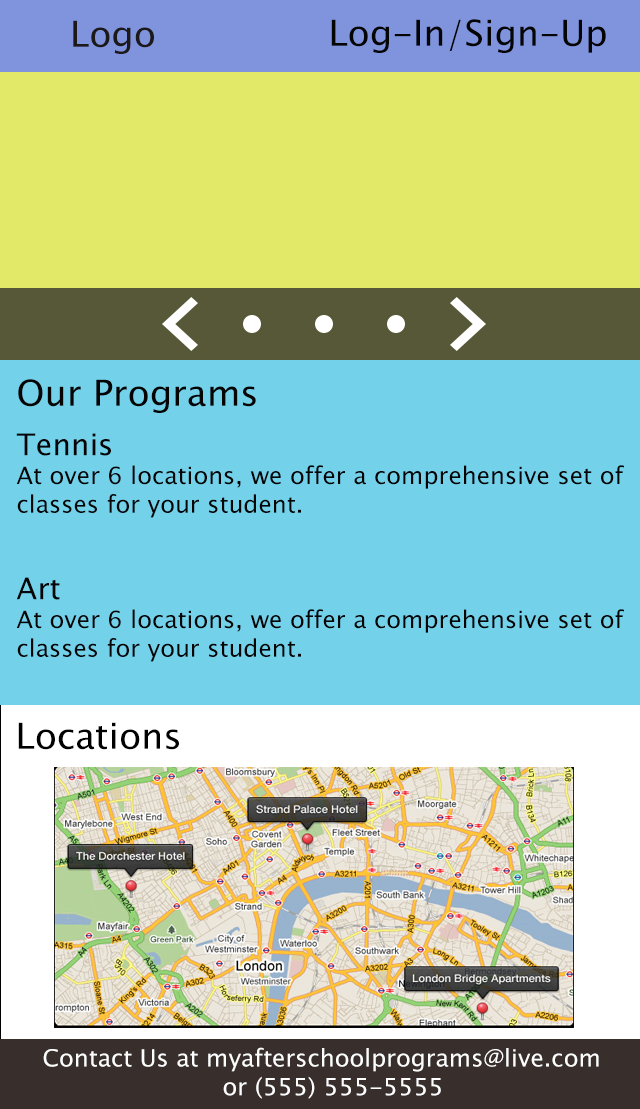
<style>
.page{position:relative;width:640px;height:1109px;background:#74d1ea}
.page>*{position:absolute;margin:0}
.t1{font:36px "LucidaSansUnicode";color:#1d1919}
.t2{font:36px "LucidaSansUnicode";color:#060505}
.t3{font:24px "LucidaSansUnicode";color:#060505}
.t4{font:30px "LucidaSansUnicode";color:#060505}
.t5{font:36px "LucidaSansUnicode";color:#000000}
.t6{font:24px "LucidaSansUnicode";color:#fefefe}
</style>
<div class="page">
<p class="t1" style="left:73px;top:20px;width:81px;height:34px">Logo</p>
<p class="t2" style="left:331px;top:19px;width:275px;height:34px">Log-In/Sign-Up</p>
<p class="t2" style="left:18px;top:379px;width:238px;height:34px">Our Programs</p>
<p class="t3" style="left:16px;top:433px;width:608px;height:229px"><span class="t4">Tennis<br></span>At over 6 locations, we offer a comprehensive set of classes for your student.<br><br><br><span class="t4">Art<br></span>At over 6 locations, we offer a comprehensive set of classes for your student.</p>
<p class="t5" style="left:18px;top:722px;width:161px;height:28px">Locations</p>
<p class="t6" style="left:43px;top:1047px;width:556px;height:52px">Contact Us at myafterschoolprograms@live.com<br>     or (555) 555-5555</p>
</div>
